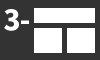
<style>
.page{position:relative;width:100px;height:60px;background:#333333}
.page>*{position:absolute;margin:0}
.t1{font:28px "NotoSansCJKkr-Black";letter-spacing:-0.03em;color:#ffffff;text-transform:uppercase}
</style>
<div class="page">
<p class="t1" style="left:4px;top:9px;width:25px;height:22px">3-</p>
</div>
